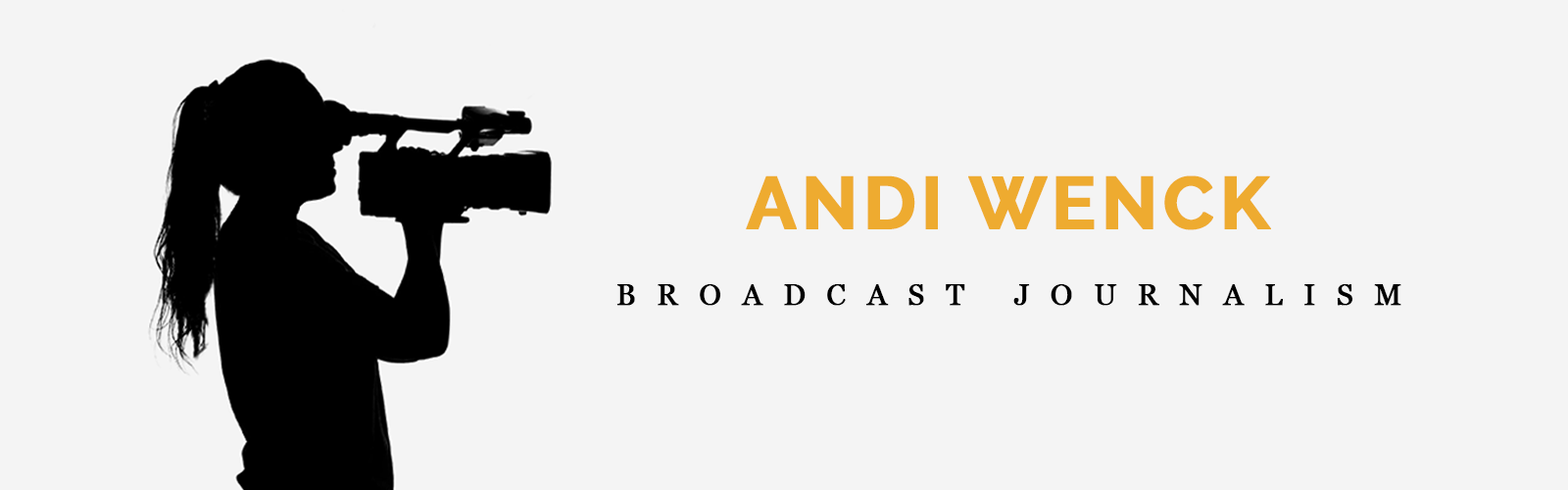
<style>
.page{position:relative;width:1568px;height:490px;background:#f4f4f4}
.page>*{position:absolute;margin:0}
.t1{font:73.5px "Raleway-Bold";letter-spacing:0.05em;color:#eeab30;font-weight:bold}
.t2{font:29.4px "Georgia";letter-spacing:0.7em;color:#000000;font-weight:bold}
</style>
<div class="page">
<p class="t1" style="left:746px;top:175px;width:525px;height:55px">ANDI WENCK</p>
<p class="t2" style="left:617px;top:284px;width:784px;height:22px">BROADCAST JOURNALISM</p>
</div>
